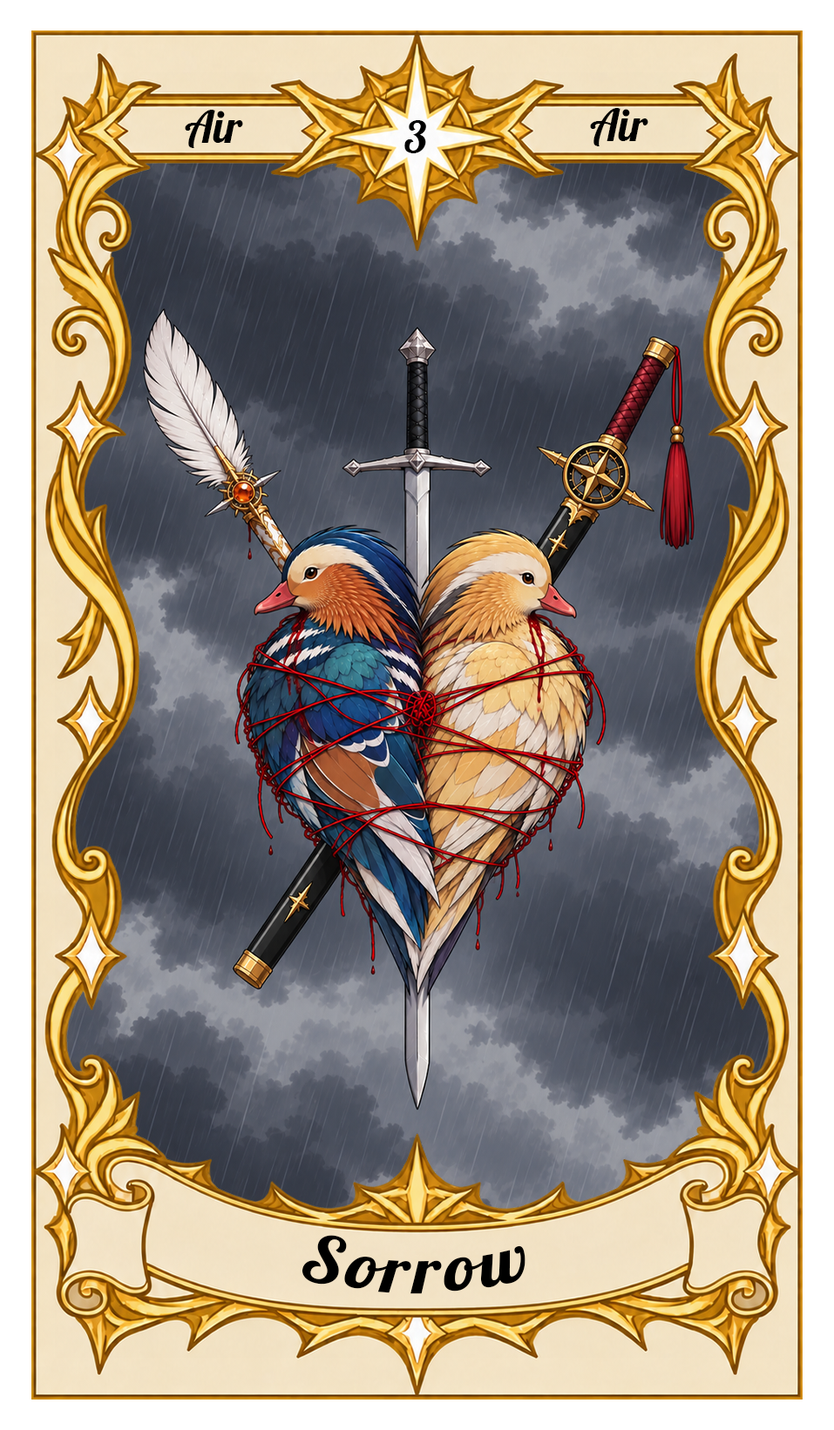
<style>
.page{position:relative;width:834px;height:1430px}
.page>*{position:absolute;margin:0}
.t1{font:43.6px "Lobster-Regular";color:#000000}
.t2{font:65.3px "Lobster-Regular";letter-spacing:0.05em;color:#000000}
</style>
<div class="page">
<p class="t1" style="left:185px;top:110px;width:58px;height:38px">Air</p>
<p class="t1" style="left:590px;top:108px;width:58px;height:38px">Air</p>
<p class="t1" style="left:404px;top:120px;width:22px;height:33px">3</p>
<p class="t2" style="left:301px;top:1235px;width:224px;height:59px">Sorrow</p>
</div>
